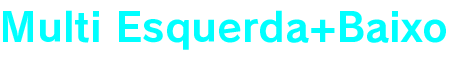
<style>
.page{position:relative;width:450px;height:60px;background:#ffffff}
.page>*{position:absolute;margin:0}
.t1{font:40px "RodinPro-B";color:#00ffff}
</style>
<div class="page">
<p class="t1" style="left:3px;top:10px;width:443px;height:40px">Multi Esquerda+Baixo</p>
</div>
